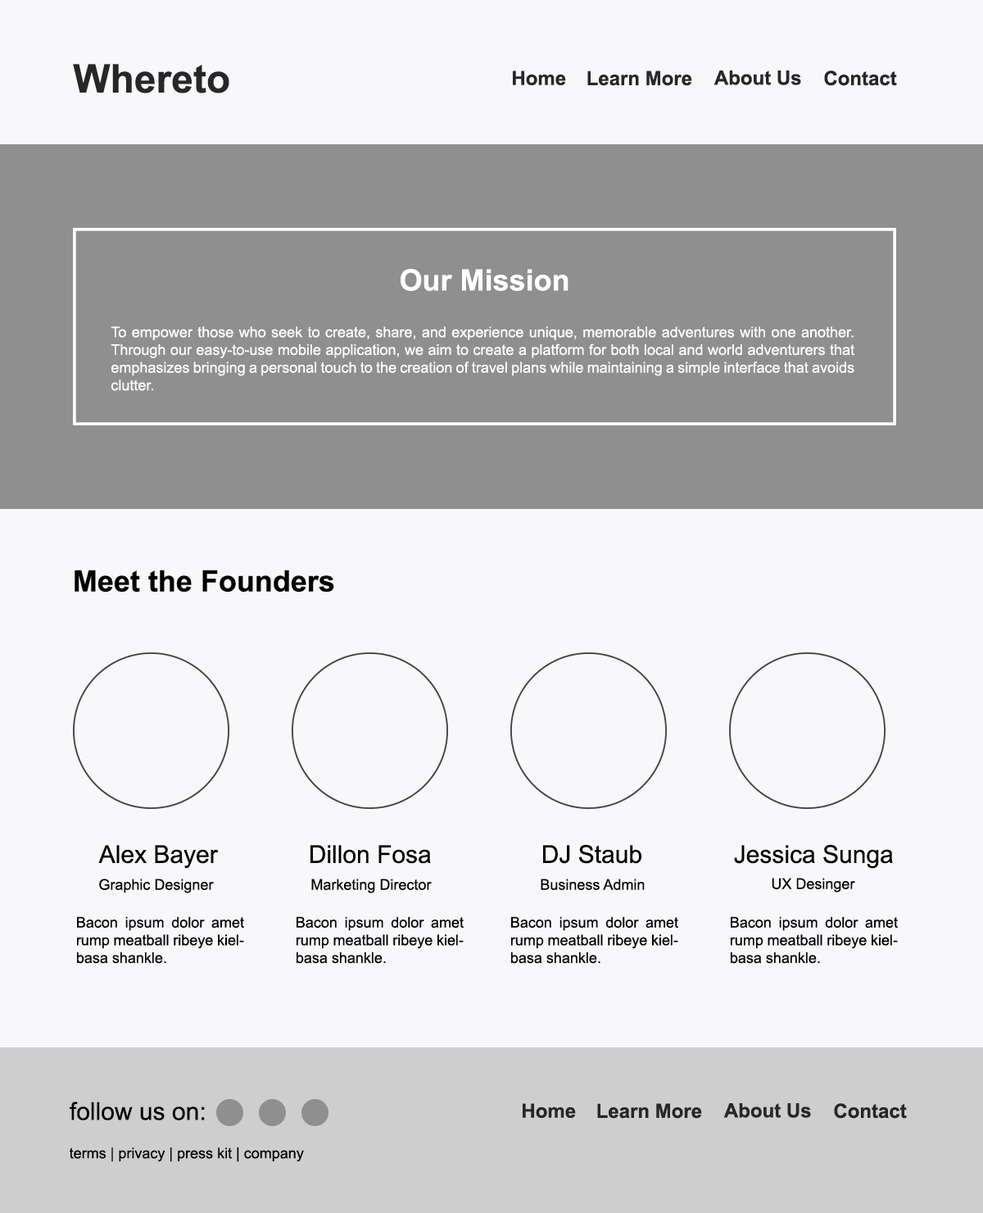
<style>
.page{position:relative;width:983px;height:1213px;background:#f8f8fa}
.page>*{position:absolute;margin:0}
.t1{font:39.3px "Arial-BoldMT";color:#282727}
.t2{font:19.7px "Arial-BoldMT";color:#282727}
.t3{font:29.5px "Arial-BoldMT";color:#ffffff}
.t4{font:14.7px "ArialMT";color:#ffffff}
.t5{font:29.5px "Arial-BoldMT";color:#000000}
.t6{font:24.6px "ArialMT";color:#000000}
.t7{font:14.7px "ArialMT";color:#000000}
</style>
<div class="page">
<p class="t1" style="left:73px;top:64px;width:156px;height:29px">Whereto</p>
<p class="t2" style="left:513px;top:70px;width:53px;height:15px">Home</p>
<p class="t2" style="left:588px;top:70px;width:104px;height:16px">Learn More</p>
<p class="t2" style="left:714px;top:70px;width:87px;height:15px">About Us</p>
<p class="t2" style="left:824px;top:70px;width:73px;height:16px">Contact</p>
<p class="t3" style="left:401px;top:269px;width:168px;height:22px">Our Mission</p>
<p class="t4" style="left:111px;top:326px;width:744px;height:65px;text-align:justify">To empower those who seek to create, share, and experience unique, memorable adventures with one another. Through our easy-to-use mobile application, we aim to create a platform for both local and world adventurers that emphasizes bringing a personal touch to the creation of travel plans while maintaining a simple interface that avoids clutter.</p>
<p class="t5" style="left:75px;top:569px;width:259px;height:23px">Meet the Founders</p>
<p class="t6" style="left:98px;top:845px;width:121px;height:24px">Alex Bayer</p>
<p class="t6" style="left:311px;top:845px;width:120px;height:19px">Dillon Fosa</p>
<p class="t6" style="left:543px;top:844px;width:99px;height:20px">DJ Staub</p>
<p class="t6" style="left:734px;top:844px;width:159px;height:25px">Jessica Sunga</p>
<p class="t7" style="left:99px;top:878px;width:115px;height:15px">Graphic Designer</p>
<p class="t7" style="left:311px;top:878px;width:121px;height:15px">Marketing Director</p>
<p class="t7" style="left:541px;top:878px;width:104px;height:12px">Business Admin</p>
<p class="t7" style="left:772px;top:878px;width:83px;height:14px">UX Desinger</p>
<p class="t7" style="left:77px;top:916px;width:167px;height:48px;text-align:justify">Bacon ipsum dolor amet rump meatball ribeye kielbasa shankle.</p>
<p class="t7" style="left:297px;top:916px;width:167px;height:48px;text-align:justify">Bacon ipsum dolor amet rump meatball ribeye kielbasa shankle.</p>
<p class="t7" style="left:511px;top:916px;width:167px;height:48px;text-align:justify">Bacon ipsum dolor amet rump meatball ribeye kielbasa shankle.</p>
<p class="t7" style="left:731px;top:916px;width:167px;height:48px;text-align:justify">Bacon ipsum dolor amet rump meatball ribeye kielbasa shankle.</p>
<p class="t6" style="left:70px;top:1101px;width:135px;height:19px">follow us on:</p>
<p class="t2" style="left:523px;top:1103px;width:53px;height:15px">Home</p>
<p class="t2" style="left:597px;top:1103px;width:105px;height:15px">Learn More</p>
<p class="t2" style="left:724px;top:1103px;width:87px;height:15px">About Us</p>
<p class="t2" style="left:834px;top:1103px;width:73px;height:15px">Contact</p>
<p class="t7" style="left:70px;top:1147px;width:234px;height:15px">terms | privacy | press kit | company</p>
</div>
